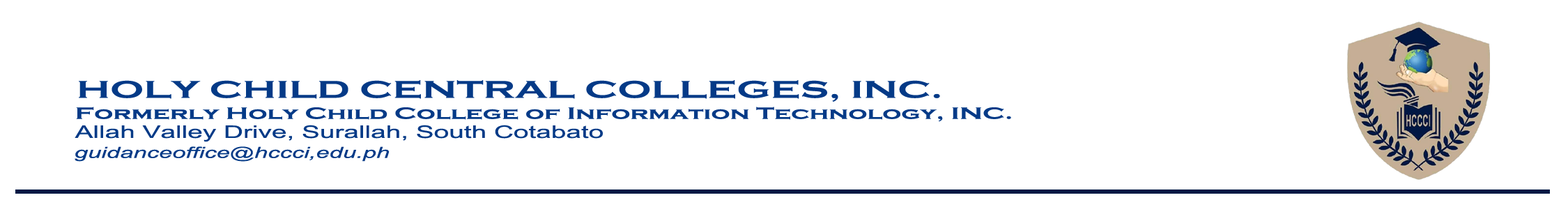
<style>
.page{position:relative;width:1568px;height:209px;background:#ffffff}
.page>*{position:absolute;margin:0}
.t1{font:25.1px "CopperplateGothic-Bold";color:#043a87;scale:1.57 1}
.t2{font:16.9px "CopperplateGothic-Bold";color:#043a87;scale:1.57 1}
.t3{font:17.3px "ArialMT";color:#043a87;scale:1.57 1}
.t4{font:15.4px "Arial-ItalicMT";color:#043a87;scale:1.57 1}
</style>
<div class="page">
<p class="t1" style="left:79px;top:80px;width:861px;height:22px">HOLY CHILD CENTRAL COLLEGES, INC.</p>
<p class="t2" style="left:76px;top:107px;width:935px;height:15px">Formerly Holy Child College of Information Technology, INC.</p>
<p class="t3" style="left:75px;top:125px;width:528px;height:17px">Allah Valley Drive, Surallah, South Cotabato</p>
<p class="t4" style="left:75px;top:146px;width:315px;height:16px">guidanceoffice@hccci,edu.ph</p>
</div>
